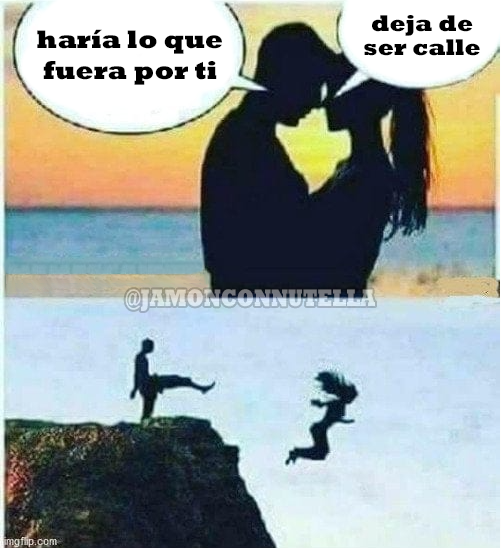
<style>
.page{position:relative;width:501px;height:548px}
.page>*{position:absolute;margin:0}
.t1{font:23.2px "Rockwell-ExtraBold";color:#000000}
.t2{font:25.9px "Rockwell-ExtraBold";color:#000000}
</style>
<div class="page">
<p class="t1" style="left:364px;top:15px;width:116px;height:41px;text-align:center">deja de<br>ser calle</p>
<p class="t2" style="left:37px;top:29px;width:185px;height:56px;text-align:center">haría lo que<br>fuera por ti</p>
</div>
